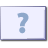
<style>
.page{position:relative;width:48px;height:48px;background:#efefff}
.page>*{position:absolute;margin:0}
.t1{font:29.6px "MyriadPro-Black";color:#8fa8ca}
</style>
<div class="page">
<p class="t1" style="left:17px;top:12px;width:12px;height:22px">?</p>
</div>
